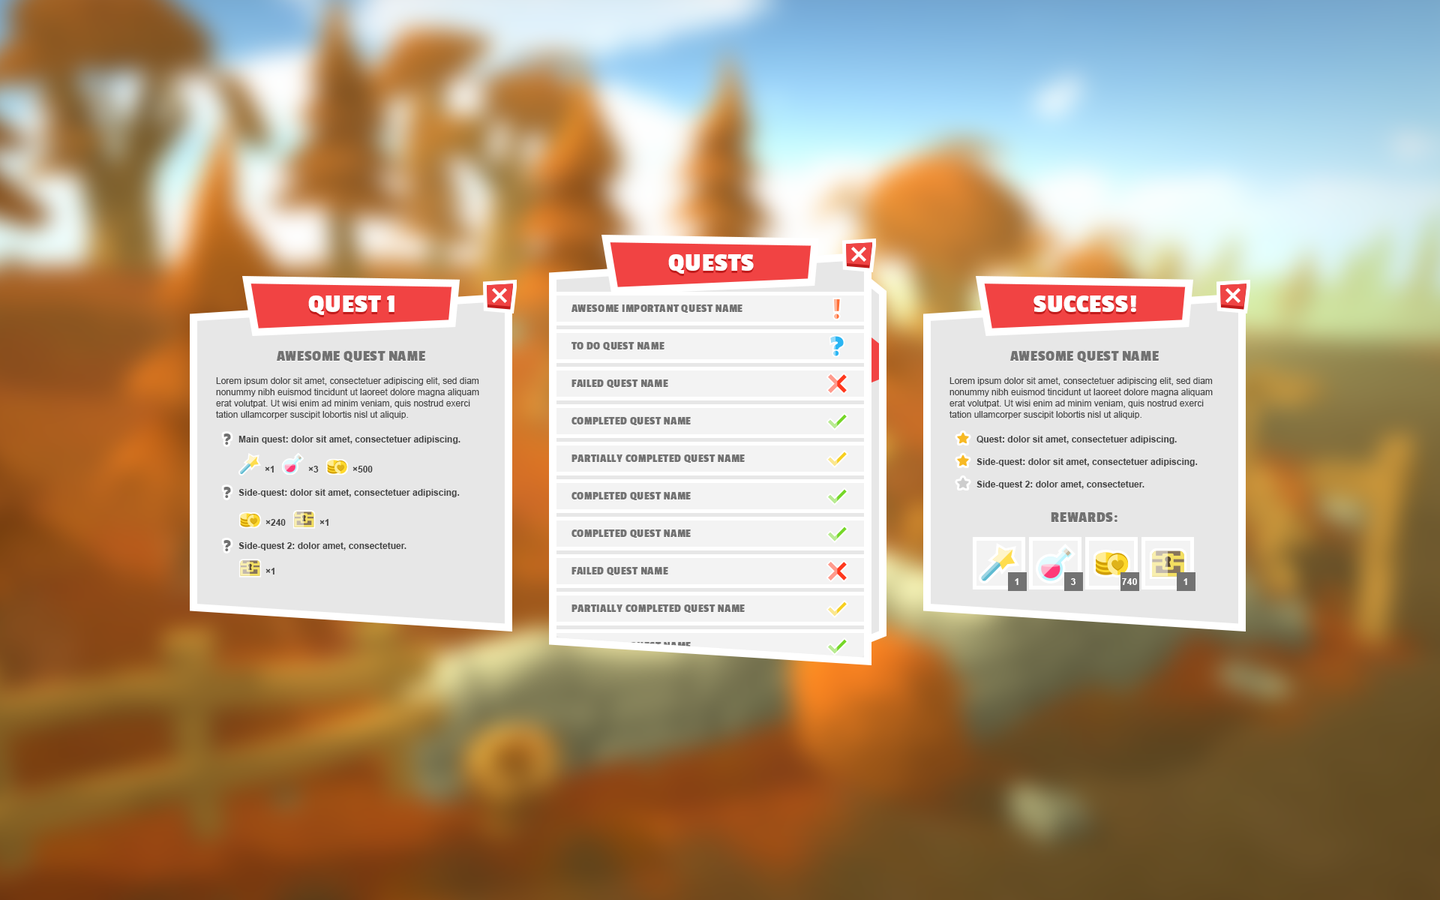
<style>
.page{position:relative;width:1440px;height:900px}
.page>*{position:absolute;margin:0}
.t1{font:26.2px "PassionOne-Bold";letter-spacing:0.025em;color:#ffffff;text-transform:uppercase}
.t2{font:11.2px "PassionOne-Bold";letter-spacing:0.025em;color:#727272;text-transform:uppercase}
.t3{font:15px "PassionOne-Bold";letter-spacing:0.025em;color:#727272;text-transform:uppercase}
.t4{font:9px/11.2px "ArialMT";color:#454545}
.t5{font:9px "Arial-BoldMT";color:#454545}
.t6{font:9px "Arial-BoldMT";letter-spacing:0.025em;color:#ffffff;text-transform:uppercase}
</style>
<div class="page">
<p class="t1" style="left:668px;top:254px;width:86px;height:20px">quests</p>
<p class="t1" style="left:308px;top:296px;width:86px;height:19px">quest 1</p>
<p class="t2" style="left:572px;top:304px;width:170px;height:9px">awesome important quest name</p>
<p class="t1" style="left:1034px;top:296px;width:102px;height:16px">Success!</p>
<p class="t2" style="left:571px;top:342px;width:93px;height:8px">to do quest name</p>
<p class="t3" style="left:277px;top:351px;width:148px;height:11px">awesome Quest name</p>
<p class="t3" style="left:1010px;top:351px;width:149px;height:11px">awesome Quest name</p>
<p class="t4" style="left:216px;top:377px;width:263px;height:42px">Lorem ipsum dolor sit amet, consectetuer adipiscing elit, sed diam nonummy nibh euismod tincidunt ut laoreet dolore magna aliquam erat volutpat. Ut wisi enim ad minim veniam, quis nostrud exerci tation ullamcorper suscipit lobortis nisl ut aliquip.</p>
<p class="t4" style="left:950px;top:377px;width:263px;height:42px">Lorem ipsum dolor sit amet, consectetuer adipiscing elit, sed diam nonummy nibh euismod tincidunt ut laoreet dolore magna aliquam erat volutpat. Ut wisi enim ad minim veniam, quis nostrud exerci tation ullamcorper suscipit lobortis nisl ut aliquip.</p>
<p class="t2" style="left:572px;top:380px;width:96px;height:8px">failed quest name</p>
<p class="t2" style="left:572px;top:417px;width:119px;height:8px">completed quest name</p>
<p class="t5" style="left:238px;top:436px;width:222px;height:8px">Main quest: dolor sit amet, consectetuer adipiscing.</p>
<p class="t5" style="left:976px;top:436px;width:201px;height:8px">Quest: dolor sit amet, consectetuer adipiscing.</p>
<p class="t2" style="left:572px;top:454px;width:173px;height:9px">partially completed quest name</p>
<p class="t5" style="left:976px;top:458px;width:222px;height:8px">Side-quest: dolor sit amet, consectetuer adipiscing.</p>
<p class="t5" style="left:265px;top:466px;width:9px;height:6px">×1</p>
<p class="t5" style="left:308px;top:466px;width:11px;height:6px">×3</p>
<p class="t5" style="left:352px;top:466px;width:21px;height:6px">×500</p>
<p class="t5" style="left:976px;top:481px;width:168px;height:8px">Side-quest 2: dolor amet, consectetuer.</p>
<p class="t5" style="left:238px;top:489px;width:222px;height:8px">Side-quest: dolor sit amet, consectetuer adipiscing.</p>
<p class="t2" style="left:572px;top:492px;width:119px;height:8px">completed quest name</p>
<p class="t5" style="left:266px;top:519px;width:20px;height:7px">×240</p>
<p class="t5" style="left:320px;top:519px;width:8px;height:7px">×1</p>
<p class="t3" style="left:1051px;top:512px;width:67px;height:10px">Rewards:</p>
<p class="t2" style="left:572px;top:530px;width:119px;height:8px">completed quest name</p>
<p class="t5" style="left:238px;top:542px;width:168px;height:8px">Side-quest 2: dolor amet, consectetuer.</p>
<p class="t5" style="left:266px;top:568px;width:8px;height:6px">×1</p>
<p class="t2" style="left:572px;top:567px;width:96px;height:8px">failed quest name</p>
<p class="t6" style="left:1015px;top:578px;width:3px;height:7px">1</p>
<p class="t6" style="left:1071px;top:578px;width:5px;height:7px">3</p>
<p class="t6" style="left:1122px;top:578px;width:15px;height:7px">740</p>
<p class="t6" style="left:1184px;top:578px;width:3px;height:7px">1</p>
<p class="t2" style="left:572px;top:604px;width:173px;height:9px">partially completed quest name</p>
<p class="t2" style="left:572px;top:642px;width:119px;height:8px">completed quest name</p>
</div>
